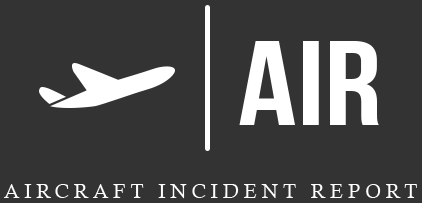
<style>
.page{position:relative;width:422px;height:203px;background:#333333}
.page>*{position:absolute;margin:0}
.t1{font:120px "BebasNeue-Bold";color:#ffffff;scale:1.2 1}
.t2{font:20px "CalistoMT";letter-spacing:0.24em;color:#ffffff;text-transform:uppercase}
</style>
<div class="page">
<p class="t1" style="left:239px;top:41px;width:140px;height:84px">AIR</p>
<p class="t2" style="left:4px;top:184px;width:413px;height:15px">Aircraft Incident Report</p>
</div>
